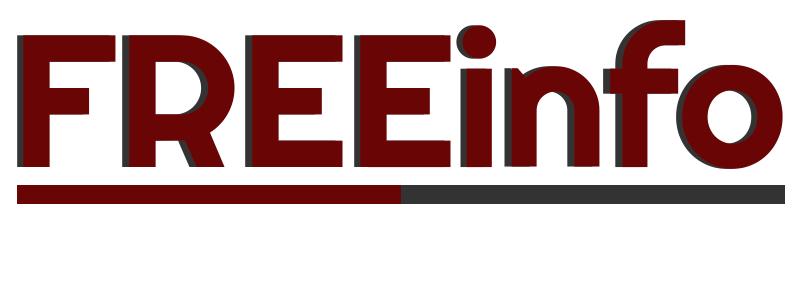
<style>
.page{position:relative;width:800px;height:300px;background:#ffffff}
.page>*{position:absolute;margin:0}
.t1{font:188.1px "Righteous-Regular";color:#6a0505}
</style>
<div class="page">
<p class="t1" style="left:17px;top:20px;width:760px;height:149px">FREEinfo</p>
<p class="t1" style="left:23px;top:20px;width:760px;height:149px">FREEinfo</p>
</div>
